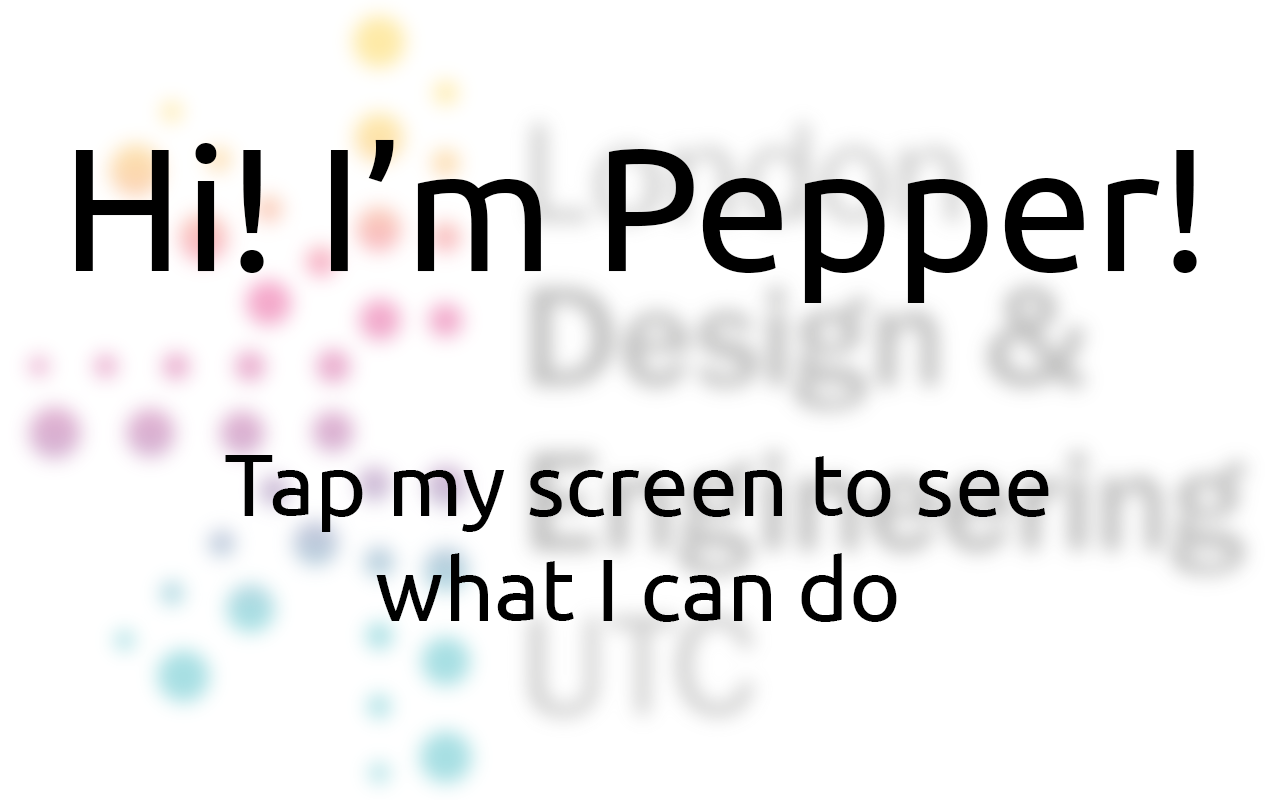
<style>
.page{position:relative;width:1280px;height:800px;background:#ffffff}
.page>*{position:absolute;margin:0}
.t1{font:174px "Ubuntu";color:#000000}
.t2{font:88px "Ubuntu";color:#000000}
</style>
<div class="page">
<p class="t1" style="left:75px;top:139px;width:1122px;height:164px">Hi! I’m Pepper!</p>
<p class="t2" style="left:225px;top:455px;width:824px;height:167px;text-align:center">Tap my screen to see<br>what I can do</p>
</div>
